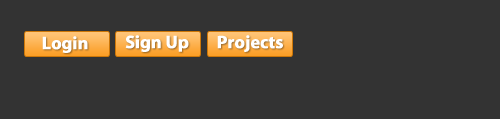
<style>
.page{position:relative;width:500px;height:119px;background:#333333}
.page>*{position:absolute;margin:0}
.t1{font:18px "MyriadPro-Bold";letter-spacing:-0.015em;color:#ffffff;font-weight:bold}
</style>
<div class="page">
<p class="t1" style="left:42px;top:36px;width:46px;height:17px">Login</p>
<p class="t1" style="left:125px;top:35px;width:64px;height:17px">Sign Up</p>
<p class="t1" style="left:217px;top:35px;width:66px;height:17px">Projects</p>
</div>
